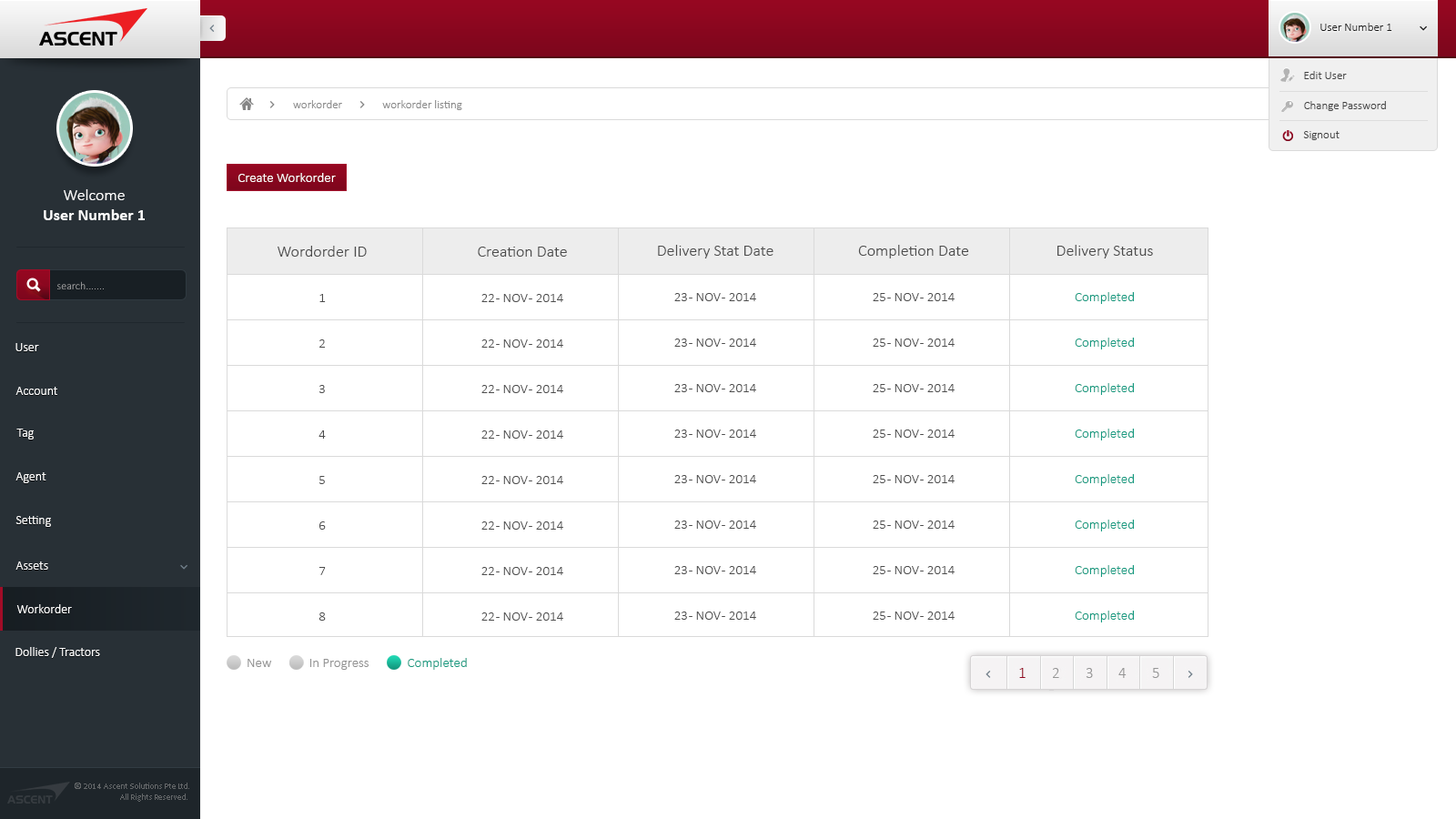
<style>
.page{position:relative;width:1456px;height:819px;background:#ffffff}
.page>*{position:absolute;margin:0}
.t1{font:11.8px "Calibri-Light";color:#1c1c1c}
.t2{font:11.8px "Calibri-Light";color:#414141}
.t3{font:11.8px "Calibri-Light";color:#868686}
.t4{font:13.6px "Calibri-Light";color:#ffffff}
.t5{font:16.4px "Calibri-Bold";color:#ffffff}
.t6{font:16.4px "Calibri-Light";color:#ffffff}
.t7{font:16.4px "Calibri-Light";color:#4c4c4c}
.t8{font:10.9px "Calibri-Light";color:#a8a9aa}
.t9{font:13.6px "Calibri-Light";color:#4c4c4c}
.t10{font:13.6px "Calibri-Light";color:#149a80}
.t11{font:12.7px "Calibri-Light";color:#ffffff}
.t12{font:13.6px "Calibri-Light";color:#919191}
.t13{font:15.5px "Calibri-Light";color:#940721}
.t14{font:15.5px "Calibri-Light";color:#959595}
.t15{font:9.1px "Calibri-Light";color:#646769}
</style>
<div class="page">
<p class="t1" style="left:1320px;top:23px;width:72px;height:8px">User Number 1</p>
<p class="t2" style="left:1304px;top:71px;width:43px;height:8px">Edit User</p>
<p class="t3" style="left:293px;top:100px;width:49px;height:8px">workorder</p>
<p class="t3" style="left:382px;top:100px;width:80px;height:10px">workorder listing</p>
<p class="t2" style="left:1304px;top:101px;width:82px;height:10px">Change Password</p>
<p class="t2" style="left:1303px;top:131px;width:37px;height:9px">Signout</p>
<p class="t4" style="left:238px;top:173px;width:98px;height:9px">Create Workorder</p>
<p class="t5" style="left:44px;top:189px;width:101px;height:31px;text-align:center"><span class="t6">Welcome<br></span>User Number 1</p>
<p class="t7" style="left:278px;top:246px;width:89px;height:11px">Wordorder ID</p>
<p class="t7" style="left:658px;top:245px;width:115px;height:13px">Delivery Stat Date</p>
<p class="t7" style="left:858px;top:245px;width:111px;height:13px">Completion Date</p>
<p class="t7" style="left:1057px;top:245px;width:96px;height:13px">Delivery Status</p>
<p class="t7" style="left:478px;top:247px;width:89px;height:10px">Creation Date</p>
<p class="t8" style="left:57px;top:281px;width:47px;height:8px">search.......</p>
<p class="t9" style="left:319px;top:294px;width:7px;height:8px">1</p>
<p class="t9" style="left:481px;top:294px;width:82px;height:8px">22 - NOV - 2014</p>
<p class="t9" style="left:674px;top:293px;width:82px;height:8px">23 - NOV - 2014</p>
<p class="t9" style="left:873px;top:293px;width:82px;height:8px">25 - NOV - 2014</p>
<p class="t10" style="left:1075px;top:292px;width:59px;height:12px">Completed</p>
<p class="t9" style="left:319px;top:339px;width:6px;height:9px">2</p>
<p class="t9" style="left:481px;top:339px;width:82px;height:9px">22 - NOV - 2014</p>
<p class="t9" style="left:674px;top:339px;width:82px;height:8px">23 - NOV - 2014</p>
<p class="t9" style="left:873px;top:339px;width:82px;height:8px">25 - NOV - 2014</p>
<p class="t10" style="left:1075px;top:338px;width:59px;height:11px">Completed</p>
<p class="t11" style="left:15px;top:343px;width:24px;height:8px">User</p>
<p class="t11" style="left:15px;top:387px;width:42px;height:8px">Account</p>
<p class="t9" style="left:319px;top:385px;width:6px;height:8px">3</p>
<p class="t9" style="left:481px;top:385px;width:82px;height:8px">22 - NOV - 2014</p>
<p class="t9" style="left:674px;top:384px;width:82px;height:8px">23 - NOV - 2014</p>
<p class="t9" style="left:873px;top:384px;width:82px;height:8px">25 - NOV - 2014</p>
<p class="t10" style="left:1075px;top:383px;width:59px;height:12px">Completed</p>
<p class="t11" style="left:16px;top:429px;width:18px;height:11px">Tag</p>
<p class="t9" style="left:318px;top:430px;width:8px;height:9px">4</p>
<p class="t9" style="left:481px;top:430px;width:82px;height:9px">22 - NOV - 2014</p>
<p class="t9" style="left:674px;top:430px;width:82px;height:8px">23 - NOV - 2014</p>
<p class="t9" style="left:873px;top:430px;width:82px;height:8px">25 - NOV - 2014</p>
<p class="t10" style="left:1075px;top:429px;width:59px;height:11px">Completed</p>
<p class="t11" style="left:15px;top:472px;width:31px;height:11px">Agent</p>
<p class="t9" style="left:318px;top:476px;width:7px;height:8px">5</p>
<p class="t9" style="left:481px;top:476px;width:82px;height:8px">22 - NOV - 2014</p>
<p class="t9" style="left:674px;top:475px;width:82px;height:8px">23 - NOV - 2014</p>
<p class="t9" style="left:873px;top:475px;width:82px;height:8px">25 - NOV - 2014</p>
<p class="t10" style="left:1075px;top:474px;width:59px;height:12px">Completed</p>
<p class="t11" style="left:15px;top:516px;width:36px;height:11px">Setting</p>
<p class="t9" style="left:319px;top:521px;width:7px;height:9px">6</p>
<p class="t9" style="left:481px;top:521px;width:82px;height:9px">22 - NOV - 2014</p>
<p class="t9" style="left:674px;top:521px;width:82px;height:8px">23 - NOV - 2014</p>
<p class="t9" style="left:873px;top:521px;width:82px;height:8px">25 - NOV - 2014</p>
<p class="t10" style="left:1075px;top:520px;width:59px;height:11px">Completed</p>
<p class="t11" style="left:15px;top:561px;width:33px;height:9px">Assets</p>
<p class="t9" style="left:318px;top:567px;width:8px;height:8px">7</p>
<p class="t9" style="left:481px;top:567px;width:82px;height:8px">22 - NOV - 2014</p>
<p class="t9" style="left:674px;top:566px;width:82px;height:8px">23 - NOV - 2014</p>
<p class="t9" style="left:873px;top:566px;width:82px;height:8px">25 - NOV - 2014</p>
<p class="t10" style="left:1075px;top:565px;width:59px;height:12px">Completed</p>
<p class="t11" style="left:16px;top:604px;width:56px;height:9px">Workorder</p>
<p class="t9" style="left:318px;top:612px;width:8px;height:9px">8</p>
<p class="t9" style="left:481px;top:612px;width:82px;height:9px">22 - NOV - 2014</p>
<p class="t9" style="left:674px;top:612px;width:82px;height:8px">23 - NOV - 2014</p>
<p class="t9" style="left:873px;top:612px;width:82px;height:8px">25 - NOV - 2014</p>
<p class="t10" style="left:1075px;top:611px;width:59px;height:11px">Completed</p>
<p class="t11" style="left:15px;top:647px;width:85px;height:11px">Dollies / Tractors</p>
<p class="t12" style="left:248px;top:659px;width:24px;height:8px">New</p>
<p class="t12" style="left:310px;top:659px;width:59px;height:11px">In Progress</p>
<p class="t10" style="left:408px;top:658px;width:59px;height:12px">Completed</p>
<p class="t13" style="left:1019px;top:668px;width:7px;height:10px">1</p>
<p class="t14" style="left:1053px;top:668px;width:6px;height:10px">2</p>
<p class="t14" style="left:1086px;top:668px;width:7px;height:10px">3</p>
<p class="t14" style="left:1118px;top:668px;width:9px;height:10px">4</p>
<p class="t14" style="left:1152px;top:668px;width:7px;height:10px">5</p>
<p class="t15" style="left:75px;top:783px;width:114px;height:19px;text-align:right">© 2014 Ascent Solutions Pte Ltd.<br>All Rights Reserved.</p>
</div>
